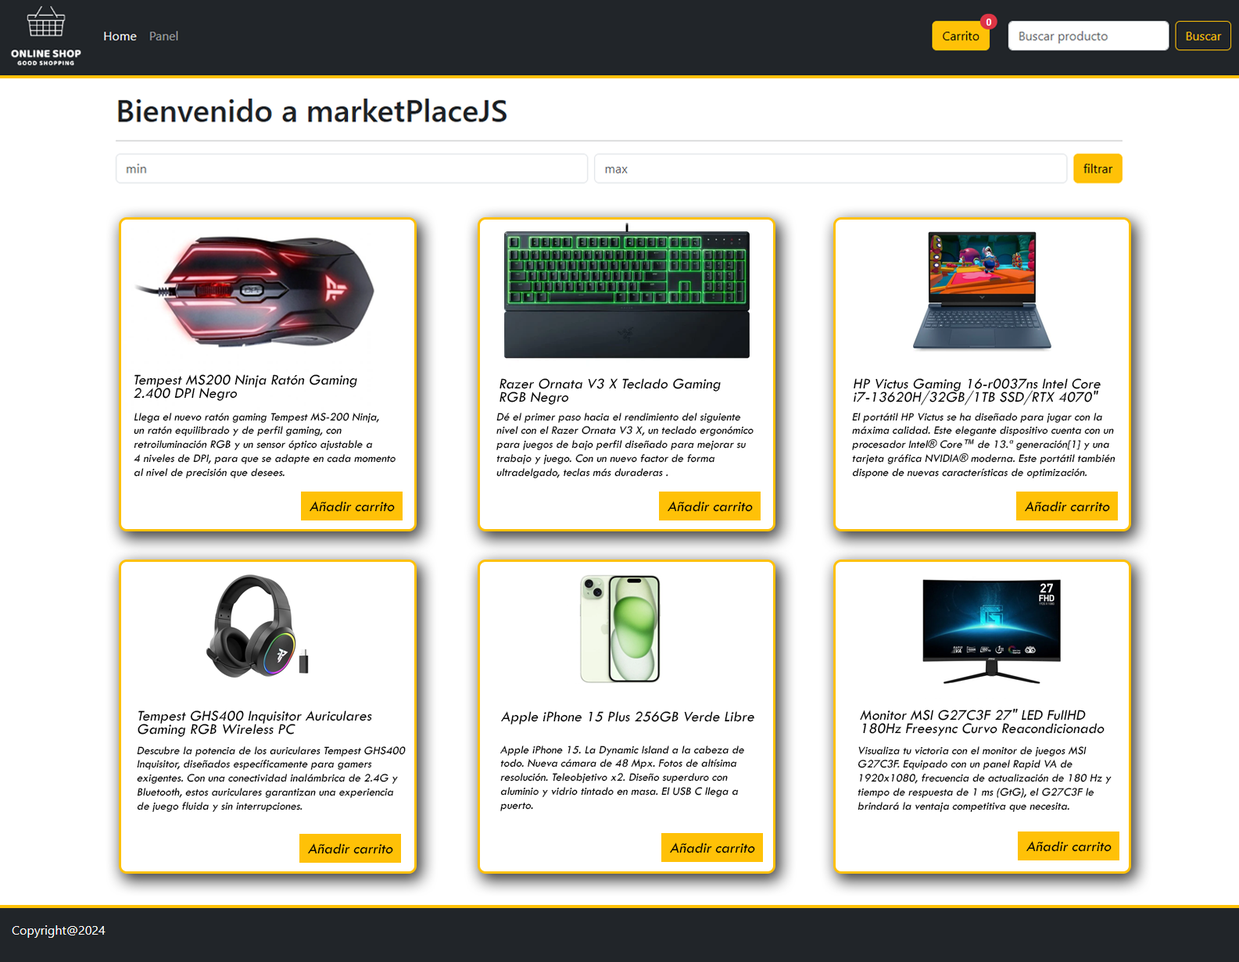
<style>
.page{position:relative;width:1239px;height:962px;background:#ffffff}
.page>*{position:absolute;margin:0}
.t1{font:15.2px/13.9px "TwCenMT-Regular";color:#000000;font-style:italic}
.t2{font:11.7px/13.9px "TwCenMT-Regular";color:#000000;font-style:italic}
.t3{font:15.2px "TwCenMT-Regular";color:#000000;font-style:italic}
</style>
<div class="page">
<p class="t1" style="left:134px;top:374px;width:223px;height:27px">Tempest MS200 Ninja Ratón Gaming <br>2.400 DPI Negro</p>
<p class="t1" style="left:500px;top:378px;width:221px;height:27px">Razer Ornata V3 X Teclado Gaming <br>RGB Negro</p>
<p class="t1" style="left:854px;top:378px;width:247px;height:28px">HP Victus Gaming 16-r0037ns Intel Core <br>i7-13620H/32GB/1TB SSD/RTX 4070"</p>
<p class="t2" style="left:134px;top:413px;width:262px;height:65px">Llega el nuevo ratón gaming Tempest MS-200 Ninja, <br>un ratón equilibrado y de perfil gaming, con <br>retroiluminación RGB y un sensor óptico ajustable a <br>4 niveles de DPI, para que se adapte en cada momento <br>al nivel de precisión que desees.</p>
<p class="t2" style="left:496px;top:413px;width:258px;height:65px">Dé el primer paso hacia el rendimiento del siguiente <br>nivel con el Razer Ornata V3 X, un teclado ergonómico <br>para juegos de bajo perfil diseñado para mejorar su <br>trabajo y juego. Con un nuevo factor de forma <br>ultradelgado, teclas más duraderas .</p>
<p class="t2" style="left:852px;top:413px;width:264px;height:65px">El portátil HP Victus se ha diseñado para jugar con la <br>máxima calidad. Este elegante dispositivo cuenta con un <br>procesador Intel® Core™ de 13.ª generación[1] y una <br>tarjeta gráfica NVIDIA® moderna. Este portátil también <br>dispone de nuevas características de optimización.</p>
<p class="t3" style="left:310px;top:501px;width:85px;height:11px">Añadir carrito</p>
<p class="t3" style="left:668px;top:501px;width:85px;height:11px">Añadir carrito</p>
<p class="t3" style="left:1025px;top:501px;width:85px;height:11px">Añadir carrito</p>
<p class="t1" style="left:138px;top:711px;width:234px;height:26px">Tempest GHS400 Inquisitor Auriculares <br>Gaming RGB Wireless PC</p>
<p class="t3" style="left:501px;top:711px;width:253px;height:14px">Apple iPhone 15 Plus 256GB Verde Libre</p>
<p class="t1" style="left:860px;top:708px;width:245px;height:28px">Monitor MSI G27C3F 27" LED FullHD <br>180Hz Freesync Curvo Reacondicionado</p>
<p class="t2" style="left:137px;top:747px;width:269px;height:65px">Descubre la potencia de los auriculares Tempest GHS400 <br>Inquisitor, diseñados específicamente para gamers <br>exigentes. Con una conectividad inalámbrica de 2.4G y <br>Bluetooth, estos auriculares garantizan una experiencia <br>de juego fluida y sin interrupciones.</p>
<p class="t2" style="left:500px;top:746px;width:244px;height:65px">Apple iPhone 15. La Dynamic Island a la cabeza de <br>todo. Nueva cámara de 48 Mpx. Fotos de altísima <br>resolución. Teleobjetivo x2. Diseño superduro con <br>aluminio y vidrio tintado en masa. El USB C llega a <br>puerto.</p>
<p class="t2" style="left:858px;top:747px;width:254px;height:65px">Visualiza tu victoria con el monitor de juegos MSI <br>G27C3F. Equipado con un panel Rapid VA de <br>1920x1080, frecuencia de actualización de 180 Hz y <br>tiempo de respuesta de 1 ms (GtG), el G27C3F le <br>brindará la ventaja competitiva que necesita.</p>
<p class="t3" style="left:308px;top:844px;width:85px;height:10px">Añadir carrito</p>
<p class="t3" style="left:670px;top:843px;width:85px;height:11px">Añadir carrito</p>
<p class="t3" style="left:1026px;top:841px;width:86px;height:11px">Añadir carrito</p>
</div>
